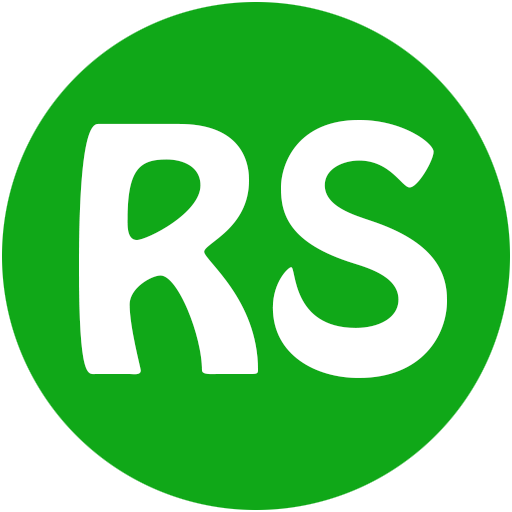
<style>
.page{position:relative;width:512px;height:512px;background:#10a818}
.page>*{position:absolute;margin:0}
.t1{font:300px "HoboStd";color:#ffffff}
</style>
<div class="page">
<p class="t1" style="left:79px;top:120px;width:368px;height:258px">RS</p>
</div>
